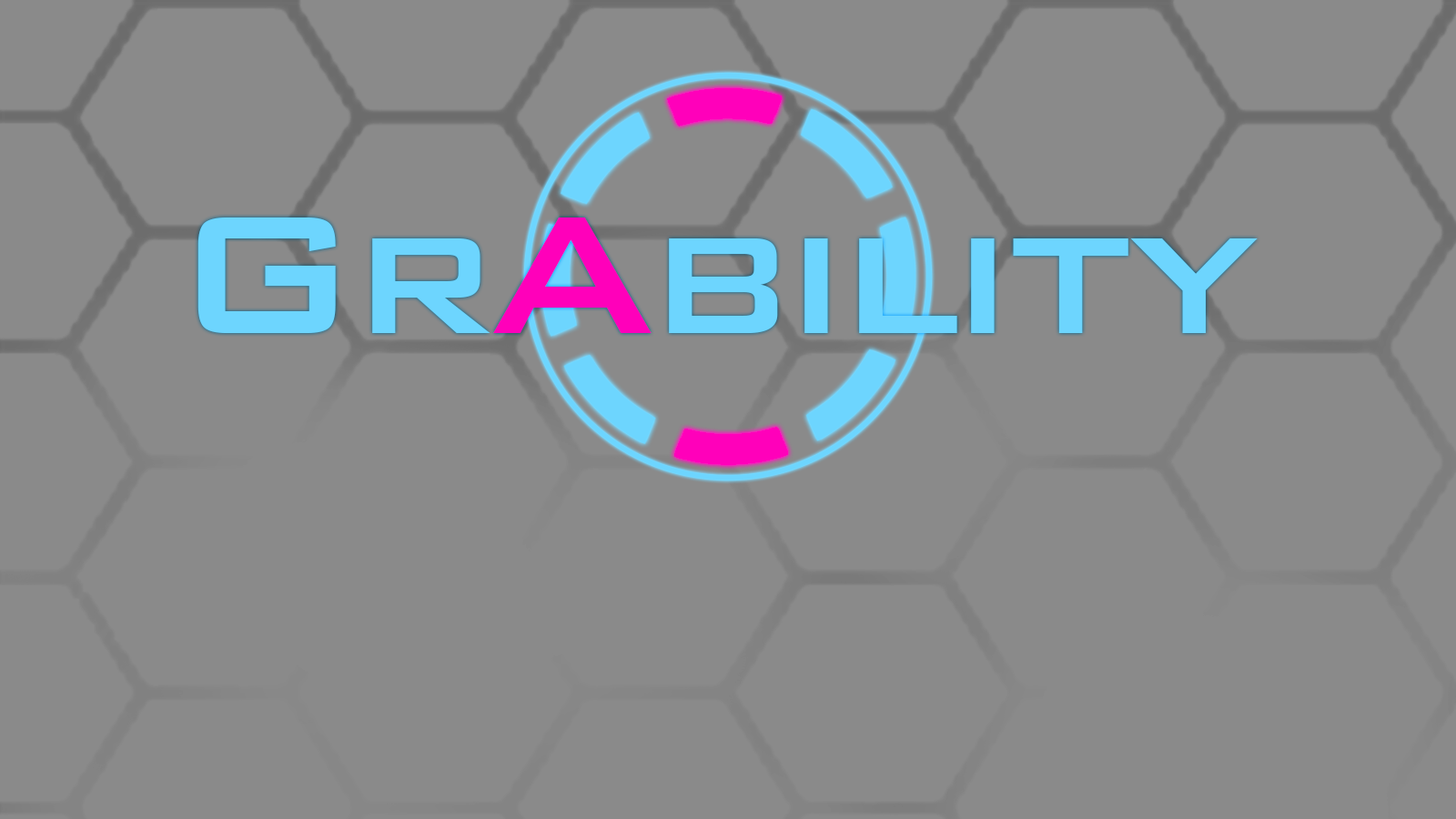
<style>
.page{position:relative;width:1456px;height:819px;background:#8a8a8a}
.page>*{position:absolute;margin:0}
.t1{font:224.2px "BankGothicBT-Medium";letter-spacing:-0.05em;color:#6dd5fe}
.t2{font:224.2px "BankGothicBT-Medium";letter-spacing:-0.05em;color:#ff00ba}
</style>
<div class="page">
<p class="t1" style="left:197px;top:217px;width:1061px;height:116px">Gr<span class="t2">A</span>bility</p>
</div>
